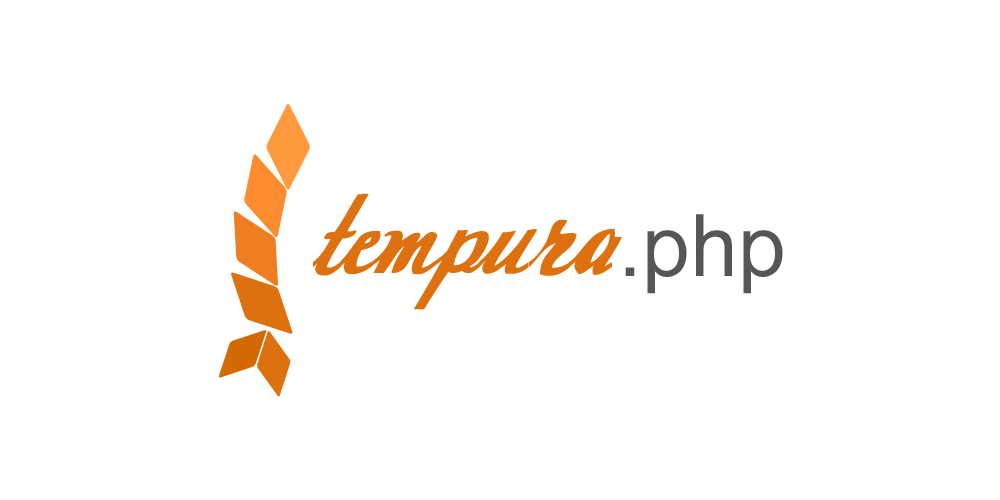
<style>
.page{position:relative;width:1000px;height:500px;background:#ffffff}
.page>*{position:absolute;margin:0}
.t1{font:171.4px "Today";color:#de710f}
.t2{font:86.1px "ArialMT";color:#565656}
</style>
<div class="page">
<p class="t1" style="left:312px;top:193px;width:310px;height:117px">tempura</p>
<p class="t2" style="left:625px;top:214px;width:158px;height:80px">.php</p>
</div>
